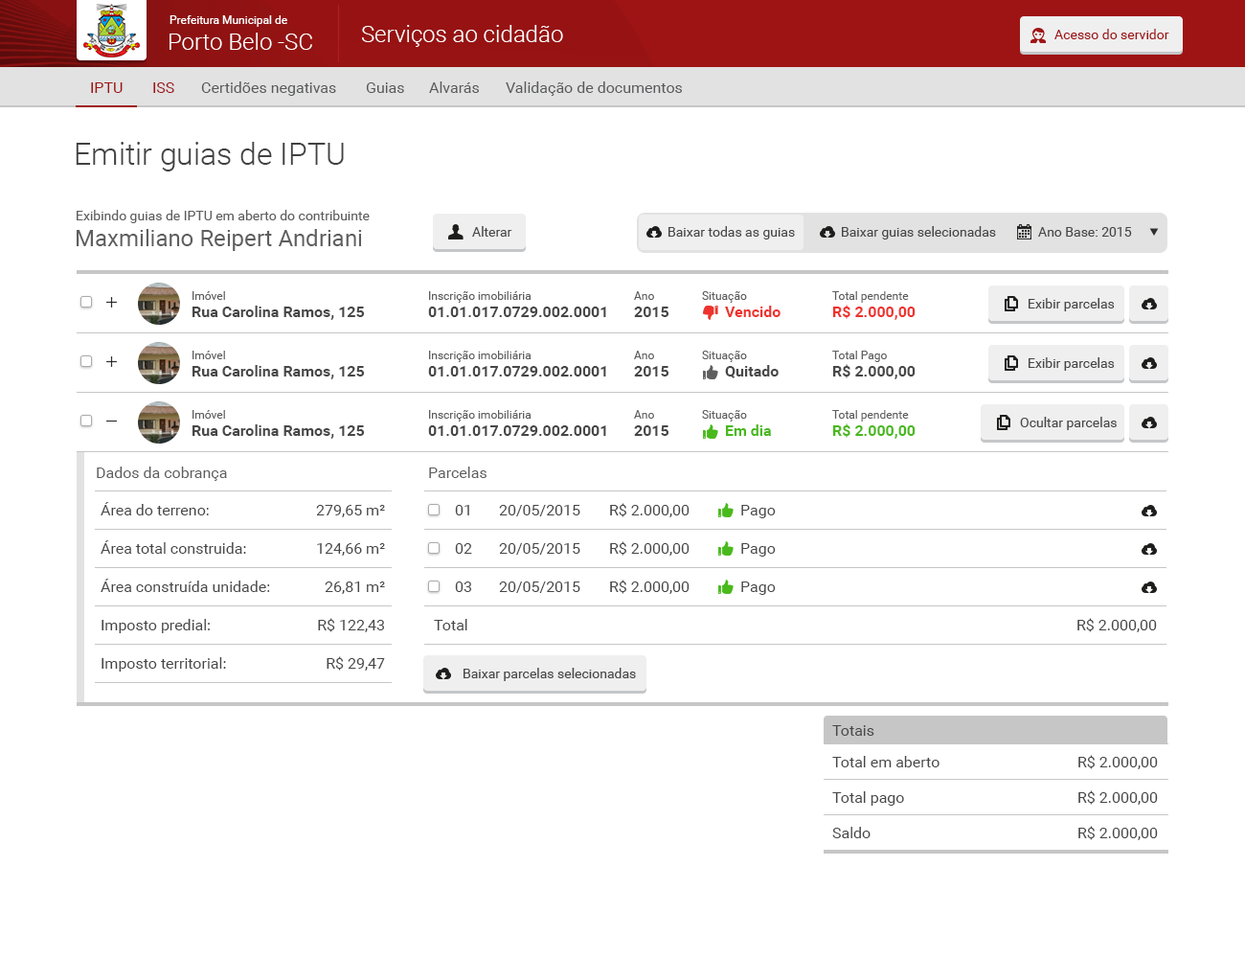
<style>
.page{position:relative;width:1245px;height:958px;background:#ffffff}
.page>*{position:absolute;margin:0}
.t1{font:11.5px "Roboto-Regular";color:#ffffff}
.t2{font:23px "Roboto-Light";color:#ffffff}
.t3{font:13.4px "Roboto-Regular";color:#9e1414}
.t4{font:15.3px "Roboto-Regular";color:#9e1414}
.t5{font:15.3px "Roboto-Regular";color:#58595b}
.t6{font:30.6px "Roboto-Light";color:#414042}
.t7{font:13.4px "Roboto-Regular";color:#5e5e5e}
.t8{font:23px "Roboto-Regular";color:#5e5e5e}
.t9{font:13.4px "Roboto-Regular";color:#474747}
.t10{font:11.5px "Roboto-Regular";color:#5e5e5e}
.t11{font:15.3px "Roboto-Bold";color:#474747}
.t12{font:15.3px "Roboto-Bold";color:#ee322d}
.t13{font:15.3px "Roboto-Bold";color:#49b91c}
.t14{font:15.3px "Roboto-Regular";color:#5e5e5e}
.t15{font:15.3px "Roboto-Regular";color:#474747}
</style>
<div class="page">
<p class="t1" style="left:170px;top:15px;width:117px;height:12px">Prefeitura Municipal de</p>
<p class="t2" style="left:362px;top:25px;width:201px;height:22px">Serviços ao cidadão</p>
<p class="t3" style="left:1054px;top:29px;width:115px;height:10px">Acesso do servidor</p>
<p class="t2" style="left:170px;top:33px;width:142px;height:17px">Porto Belo -SC</p>
<p class="t4" style="left:91px;top:82px;width:32px;height:11px">IPTU</p>
<p class="t4" style="left:153px;top:82px;width:21px;height:11px">ISS</p>
<p class="t5" style="left:201px;top:81px;width:135px;height:15px">Certidões negativas</p>
<p class="t5" style="left:366px;top:82px;width:38px;height:11px">Guias</p>
<p class="t5" style="left:429px;top:81px;width:50px;height:12px">Alvarás</p>
<p class="t5" style="left:506px;top:81px;width:176px;height:15px">Validação de documentos</p>
<p class="t6" style="left:76px;top:142px;width:268px;height:29px">Emitir guias de IPTU</p>
<p class="t7" style="left:77px;top:210px;width:293px;height:13px">Exibindo guias de IPTU em aberto do contribuinte</p>
<p class="t8" style="left:77px;top:229px;width:285px;height:22px">Maxmiliano Reipert Andriani</p>
<p class="t9" style="left:472px;top:226px;width:40px;height:11px">Alterar</p>
<p class="t9" style="left:668px;top:226px;width:127px;height:13px">Baixar todas as guias</p>
<p class="t9" style="left:842px;top:226px;width:154px;height:13px">Baixar guias selecionadas</p>
<p class="t9" style="left:1038px;top:227px;width:94px;height:10px">Ano Base: 2015</p>
<p class="t10" style="left:193px;top:291px;width:32px;height:9px">Imóvel</p>
<p class="t10" style="left:429px;top:291px;width:103px;height:12px">Inscrição imobiliária</p>
<p class="t10" style="left:634px;top:291px;width:20px;height:9px">Ano</p>
<p class="t10" style="left:702px;top:291px;width:45px;height:12px">Situação</p>
<p class="t10" style="left:832px;top:291px;width:77px;height:12px">Total pendente</p>
<p class="t11" style="left:193px;top:306px;width:171px;height:14px">Rua Carolina Ramos, 125</p>
<p class="t12" style="left:725px;top:306px;width:56px;height:11px">Vencido</p>
<p class="t12" style="left:833px;top:305px;width:83px;height:15px">R$ 2.000,00</p>
<p class="t9" style="left:1029px;top:298px;width:86px;height:13px">Exibir parcelas</p>
<p class="t11" style="left:428px;top:306px;width:178px;height:11px">01.01.017.0729.002.0001</p>
<p class="t11" style="left:634px;top:306px;width:34px;height:11px">2015</p>
<p class="t10" style="left:193px;top:351px;width:32px;height:8px">Imóvel</p>
<p class="t10" style="left:429px;top:351px;width:103px;height:11px">Inscrição imobiliária</p>
<p class="t10" style="left:634px;top:351px;width:20px;height:8px">Ano</p>
<p class="t10" style="left:702px;top:351px;width:45px;height:11px">Situação</p>
<p class="t10" style="left:832px;top:351px;width:55px;height:11px">Total Pago</p>
<p class="t11" style="left:193px;top:365px;width:171px;height:14px">Rua Carolina Ramos, 125</p>
<p class="t11" style="left:428px;top:366px;width:178px;height:10px">01.01.017.0729.002.0001</p>
<p class="t11" style="left:634px;top:366px;width:34px;height:10px">2015</p>
<p class="t11" style="left:725px;top:365px;width:54px;height:13px">Quitado</p>
<p class="t11" style="left:833px;top:364px;width:83px;height:15px">R$ 2.000,00</p>
<p class="t9" style="left:1029px;top:357px;width:86px;height:14px">Exibir parcelas</p>
<p class="t10" style="left:193px;top:410px;width:32px;height:9px">Imóvel</p>
<p class="t10" style="left:429px;top:410px;width:103px;height:11px">Inscrição imobiliária</p>
<p class="t10" style="left:634px;top:410px;width:20px;height:9px">Ano</p>
<p class="t10" style="left:702px;top:410px;width:45px;height:11px">Situação</p>
<p class="t10" style="left:832px;top:410px;width:77px;height:11px">Total pendente</p>
<p class="t11" style="left:193px;top:424px;width:171px;height:15px">Rua Carolina Ramos, 125</p>
<p class="t11" style="left:428px;top:425px;width:178px;height:11px">01.01.017.0729.002.0001</p>
<p class="t11" style="left:634px;top:425px;width:34px;height:11px">2015</p>
<p class="t13" style="left:726px;top:424px;width:45px;height:12px">Em dia</p>
<p class="t13" style="left:833px;top:423px;width:83px;height:16px">R$ 2.000,00</p>
<p class="t9" style="left:1020px;top:417px;width:97px;height:13px">Ocultar parcelas</p>
<p class="t14" style="left:97px;top:466px;width:130px;height:15px">Dados da cobrança</p>
<p class="t14" style="left:429px;top:466px;width:58px;height:12px">Parcelas</p>
<p class="t15" style="left:101px;top:502px;width:108px;height:13px">Área do terreno:</p>
<p class="t15" style="left:316px;top:505px;width:69px;height:12px">279,65 m²</p>
<p class="t15" style="left:455px;top:505px;width:14px;height:10px">01</p>
<p class="t15" style="left:499px;top:505px;width:81px;height:11px">20/05/2015</p>
<p class="t15" style="left:610px;top:503px;width:80px;height:14px">R$ 2.000,00</p>
<p class="t15" style="left:741px;top:505px;width:35px;height:13px">Pago</p>
<p class="t15" style="left:101px;top:540px;width:145px;height:14px">Área total construida:</p>
<p class="t15" style="left:317px;top:543px;width:68px;height:12px">124,66 m²</p>
<p class="t15" style="left:455px;top:543px;width:17px;height:11px">02</p>
<p class="t15" style="left:499px;top:543px;width:81px;height:12px">20/05/2015</p>
<p class="t15" style="left:610px;top:541px;width:80px;height:14px">R$ 2.000,00</p>
<p class="t15" style="left:741px;top:543px;width:35px;height:13px">Pago</p>
<p class="t15" style="left:101px;top:578px;width:169px;height:14px">Área construída unidade:</p>
<p class="t15" style="left:325px;top:581px;width:60px;height:13px">26,81 m²</p>
<p class="t15" style="left:455px;top:581px;width:16px;height:11px">03</p>
<p class="t15" style="left:499px;top:581px;width:81px;height:12px">20/05/2015</p>
<p class="t15" style="left:610px;top:579px;width:80px;height:15px">R$ 2.000,00</p>
<p class="t15" style="left:741px;top:581px;width:35px;height:14px">Pago</p>
<p class="t15" style="left:318px;top:618px;width:66px;height:14px">R$ 122,43</p>
<p class="t15" style="left:1077px;top:618px;width:80px;height:14px">R$ 2.000,00</p>
<p class="t15" style="left:102px;top:619px;width:108px;height:14px">Imposto predial:</p>
<p class="t15" style="left:434px;top:619px;width:33px;height:11px">Total</p>
<p class="t15" style="left:102px;top:657px;width:124px;height:14px">Imposto territorial:</p>
<p class="t15" style="left:327px;top:656px;width:58px;height:14px">R$ 29,47</p>
<p class="t9" style="left:464px;top:668px;width:172px;height:13px">Baixar parcelas selecionadas</p>
<p class="t15" style="left:832px;top:725px;width:42px;height:11px">Totais</p>
<p class="t15" style="left:832px;top:756px;width:108px;height:11px">Total em aberto</p>
<p class="t15" style="left:1078px;top:755px;width:80px;height:14px">R$ 2.000,00</p>
<p class="t15" style="left:832px;top:791px;width:72px;height:14px">Total pago</p>
<p class="t15" style="left:1078px;top:790px;width:80px;height:14px">R$ 2.000,00</p>
<p class="t15" style="left:832px;top:827px;width:39px;height:11px">Saldo</p>
<p class="t15" style="left:1078px;top:826px;width:80px;height:14px">R$ 2.000,00</p>
</div>
